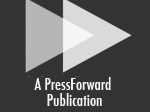
<style>
.page{position:relative;width:150px;height:112px;background:#333333}
.page>*{position:absolute;margin:0}
.t1{font:16px/16px "Futura-CondensedMedium";color:#f8f8f8}
</style>
<div class="page">
<p class="t1" style="left:34px;top:77px;width:77px;height:29px;text-align:center">A PressForward <br>Publication</p>
</div>
